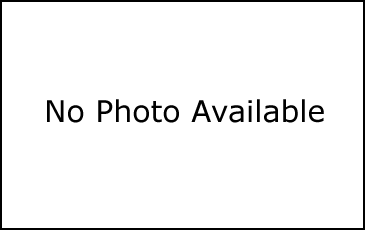
<style>
.page{position:relative;width:365px;height:230px;background:#ffffff}
.page>*{position:absolute;margin:0}
.t1{font:30px "Verdana";color:#000000}
</style>
<div class="page">
<p class="t1" style="left:47px;top:99px;width:277px;height:24px">No Photo Available</p>
</div>
